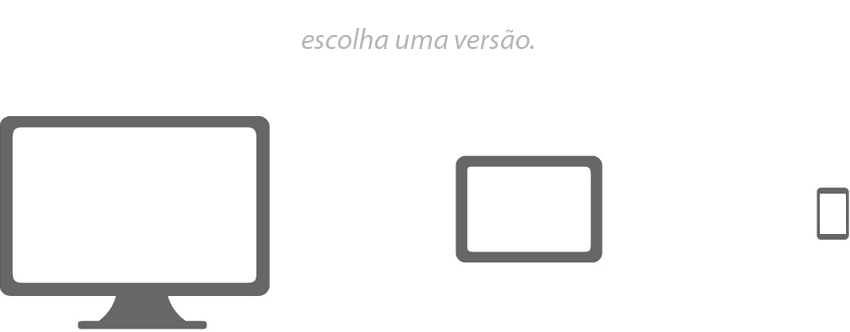
<style>
.page{position:relative;width:850px;height:332px;background:#ffffff}
.page>*{position:absolute;margin:0}
.t1{font:29px "MyriadPro-It";color:#b4b4b4}
</style>
<div class="page">
<p class="t1" style="left:302px;top:28px;width:232px;height:21px">escolha uma versão.</p>
</div>
